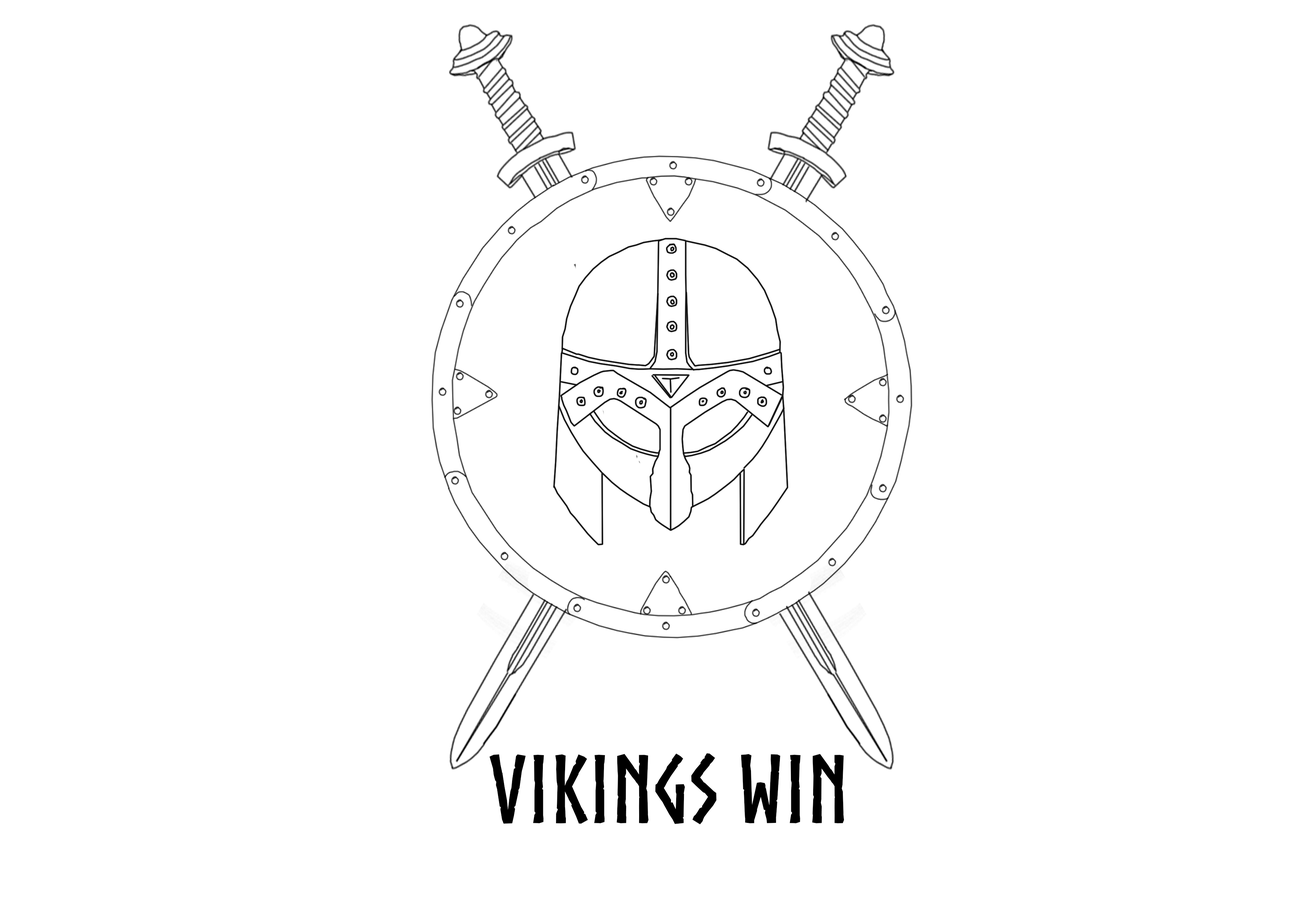
<style>
.page{position:relative;width:1299px;height:918px;background:#ffffff}
.page>*{position:absolute;margin:0}
.t1{font:92.6px "Norse-Bold";color:#000000}
</style>
<div class="page">
<p class="t1" style="left:489px;top:753px;width:355px;height:71px">Vikings Win</p>
</div>
